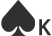
<style>
.page{position:relative;width:52px;height:36px;background:#ffffff}
.page>*{position:absolute;margin:0}
.t1{font:23.4px "MyriadPro-Regular";letter-spacing:-0.1em;color:#303030;font-weight:bold}
</style>
<div class="page">
<p class="t1" style="left:39px;top:19px;width:12px;height:17px">K</p>
</div>
